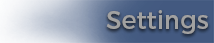
<style>
.page{position:relative;width:214px;height:43px}
.page>*{position:absolute;margin:0}
.t1{font:25px "Montserrat-Regular";color:#a1a1a1}
</style>
<div class="page">
<p class="t1" style="left:106px;top:10px;width:102px;height:24px">Settings</p>
</div>
